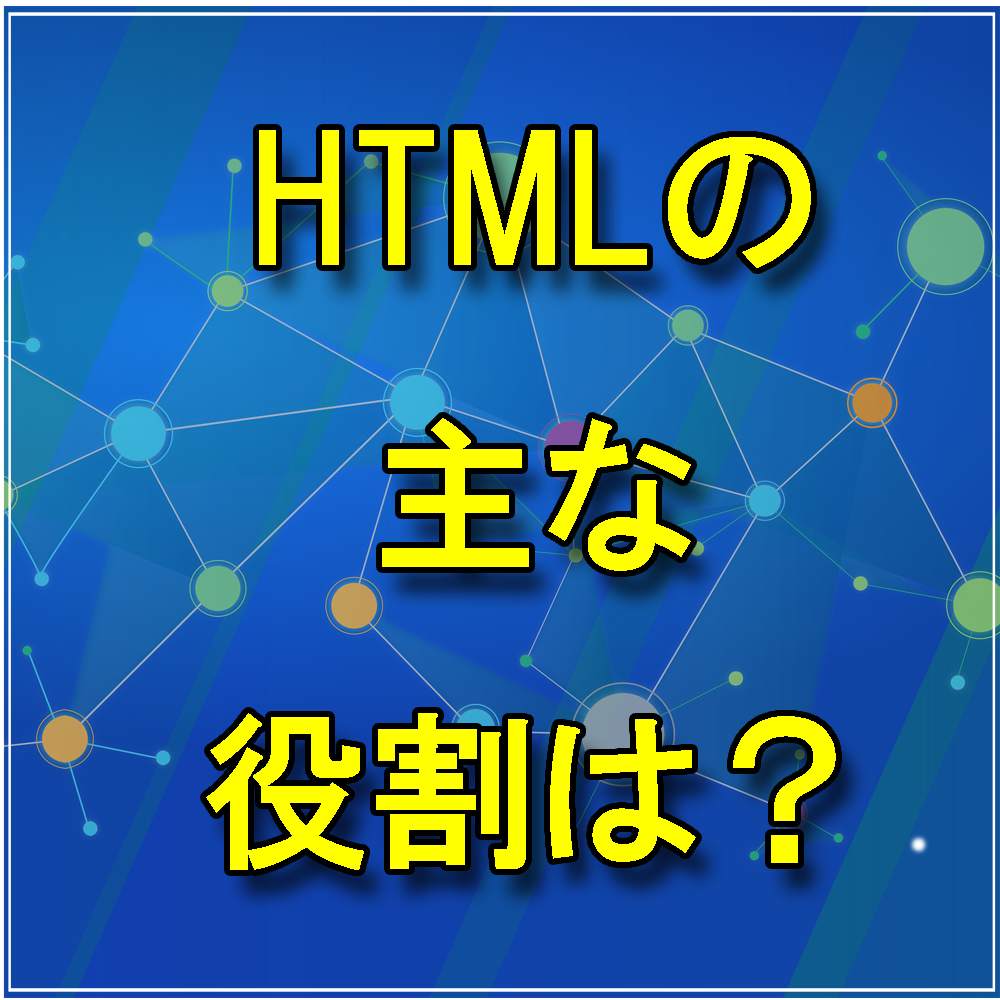
<style>
.page{position:relative;width:1000px;height:1000px}
.page>*{position:absolute;margin:0}
.t1{font:168.5px "HGPGothicE";color:#ffff00}
</style>
<div class="page">
<p class="t1" style="left:206px;top:130px;width:630px;height:740px;text-align:center">HTMLの<br>主な<br>役割は？</p>
</div>
